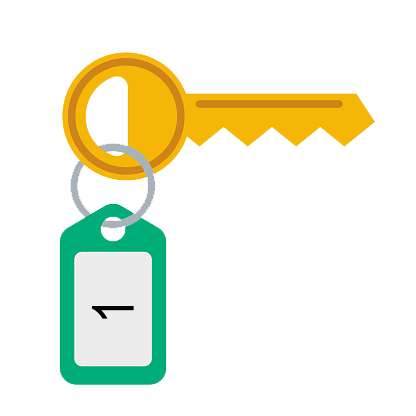
<style>
.page{position:relative;width:416px;height:416px;background:#ffffff}
.page>*{position:absolute;margin:0}
.t1{font:58.3px "ArialNarrow";letter-spacing:0.04em;color:#000000;text-transform:uppercase}
</style>
<div class="page">
<p class="t1" style="left:92px;top:306px;width:42px;height:13px;rotate:-90deg">1</p>
</div>
